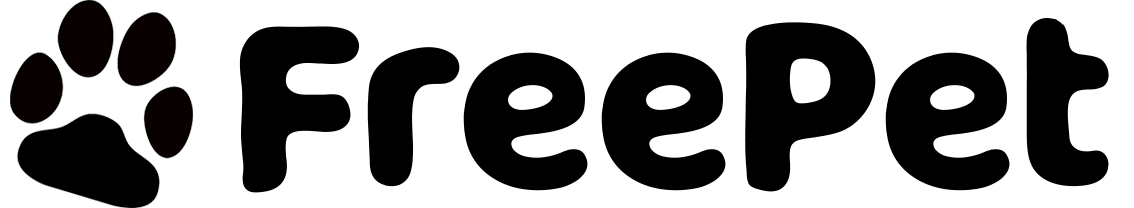
<style>
.page{position:relative;width:1134px;height:208px;background:#ffffff}
.page>*{position:absolute;margin:0}
.t1{font:240.4px "MilkyNiceClean";color:#000000}
</style>
<div class="page">
<p class="t1" style="left:239px;top:18px;width:870px;height:175px">FreePet</p>
</div>
